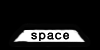
<style>
.page{position:relative;width:100px;height:50px;background:#000000}
.page>*{position:absolute;margin:0}
.t1{font:12px "Gulim";letter-spacing:0.08em;color:#040404;font-weight:bold}
</style>
<div class="page">
<p class="t1" style="left:31px;top:32px;width:38px;height:9px">space</p>
</div>
